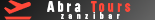
<style>
.page{position:relative;width:155px;height:20px}
.page>*{position:absolute;margin:0}
.t1{font:17px "RoundkeySoft-Bold";letter-spacing:0.2em;color:#ff4838}
.t2{font:17px "RoundkeySoft-Bold";letter-spacing:0.2em;color:#ffffff}
.t3{font:10px "RoundkeySoft-Bold";letter-spacing:0.5em;color:#ffffff}
</style>
<div class="page">
<p class="t1" style="left:47px;top:1px;width:84px;height:12px"><span class="t2">Abra </span>Tours</p>
<p class="t3" style="left:61px;top:12px;width:59px;height:7px">zanzibar</p>
</div>
